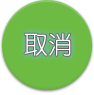
<style>
.page{position:relative;width:94px;height:95px;background:#6dbb42}
.page>*{position:absolute;margin:0}
.t1{font:24px "FZY1JW--GB1-0";letter-spacing:0.02em;color:#ffffff}
</style>
<div class="page">
<p class="t1" style="left:24px;top:33px;width:47px;height:23px">取消</p>
</div>
